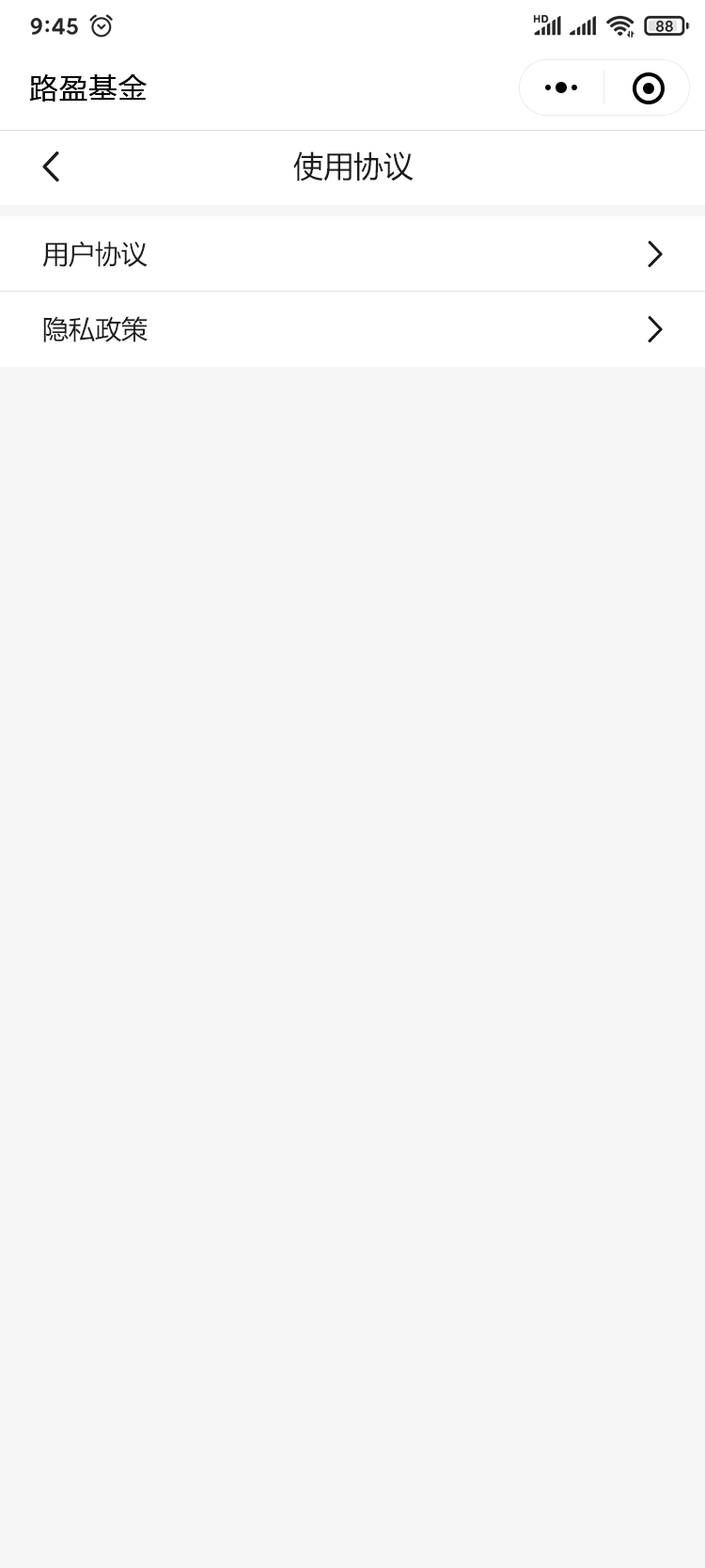
<style>
.page{position:relative;width:705px;height:1568px;background:#f5f5f5}
.page>*{position:absolute;margin:0}
.t1{font:28.2px "MicrosoftYaHei";letter-spacing:0.05em;color:#000000}
.t2{font:30.1px "MicrosoftYaHei";color:#1b1b1b}
.t3{font:26.3px/75.2px "MicrosoftYaHei";color:#1b1b1b}
</style>
<div class="page">
<p class="t1" style="left:29px;top:74px;width:118px;height:28px">路盈基金</p>
<p class="t2" style="left:293px;top:151px;width:121px;height:31px">使用协议</p>
<p class="t3" style="left:42px;top:241px;width:106px;height:101px">用户协议<br>隐私政策</p>
</div>
